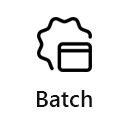
<style>
.page{position:relative;width:129px;height:124px;background:#ffffff}
.page>*{position:absolute;margin:0}
.t1{font:22.9px "YuGothicUI-Semibold";color:#111111}
</style>
<div class="page">
<p class="t1" style="left:37px;top:90px;width:55px;height:17px">Batch</p>
</div>
